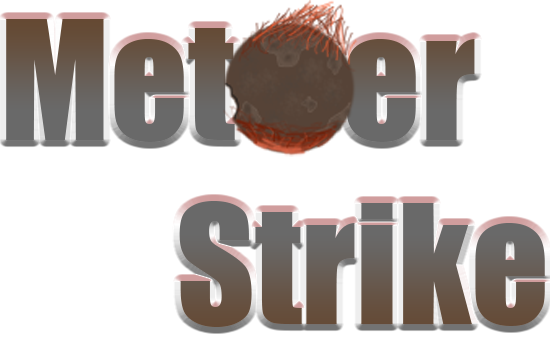
<style>
.page{position:relative;width:550px;height:344px;background:#ffffff}
.page>*{position:absolute;margin:0}
.t1{font:153.3px "Impact";color:#685f59}
</style>
<div class="page">
<p class="t1" style="left:6px;top:19px;width:539px;height:308px">Met    er <br>   Strike</p>
</div>
